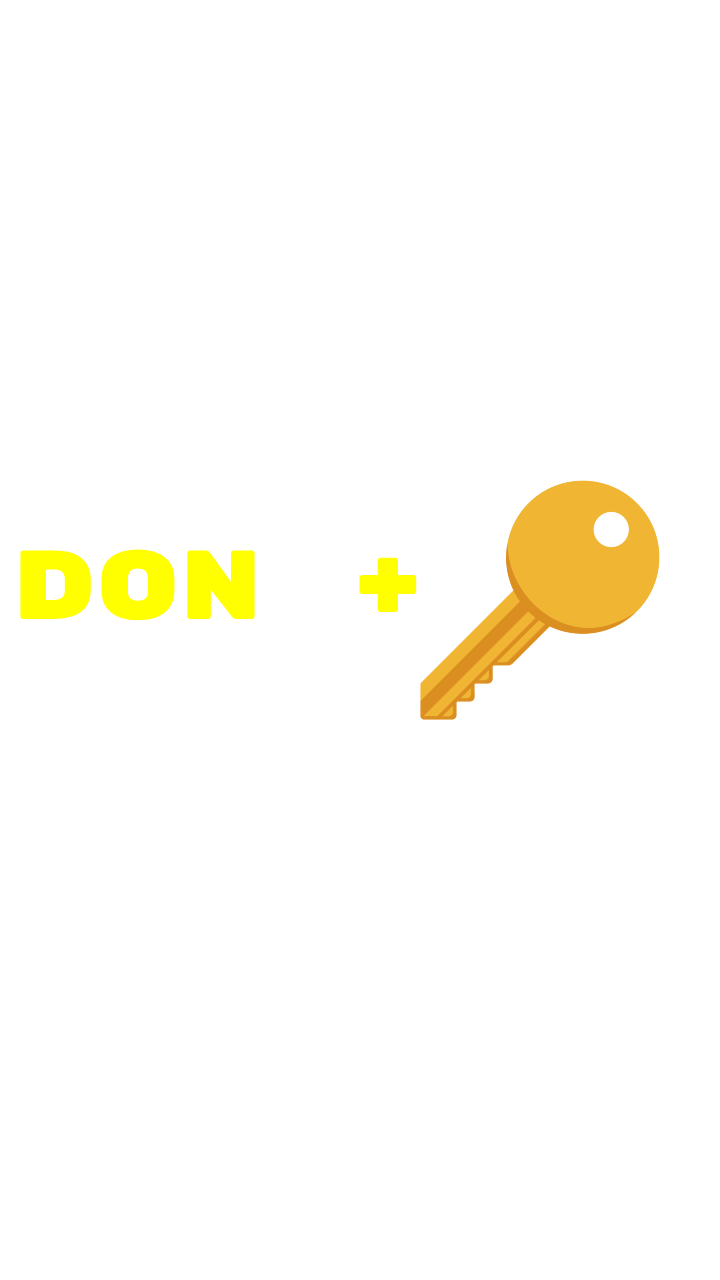
<style>
.page{position:relative;width:720px;height:1280px;background:#ffffff}
.page>*{position:absolute;margin:0}
.t1{font:98px "RubikMonoOne-Regular";color:#ffff00}
</style>
<div class="page">
<p class="t1" style="left:20px;top:549px;width:397px;height:71px">DON +</p>
</div>
